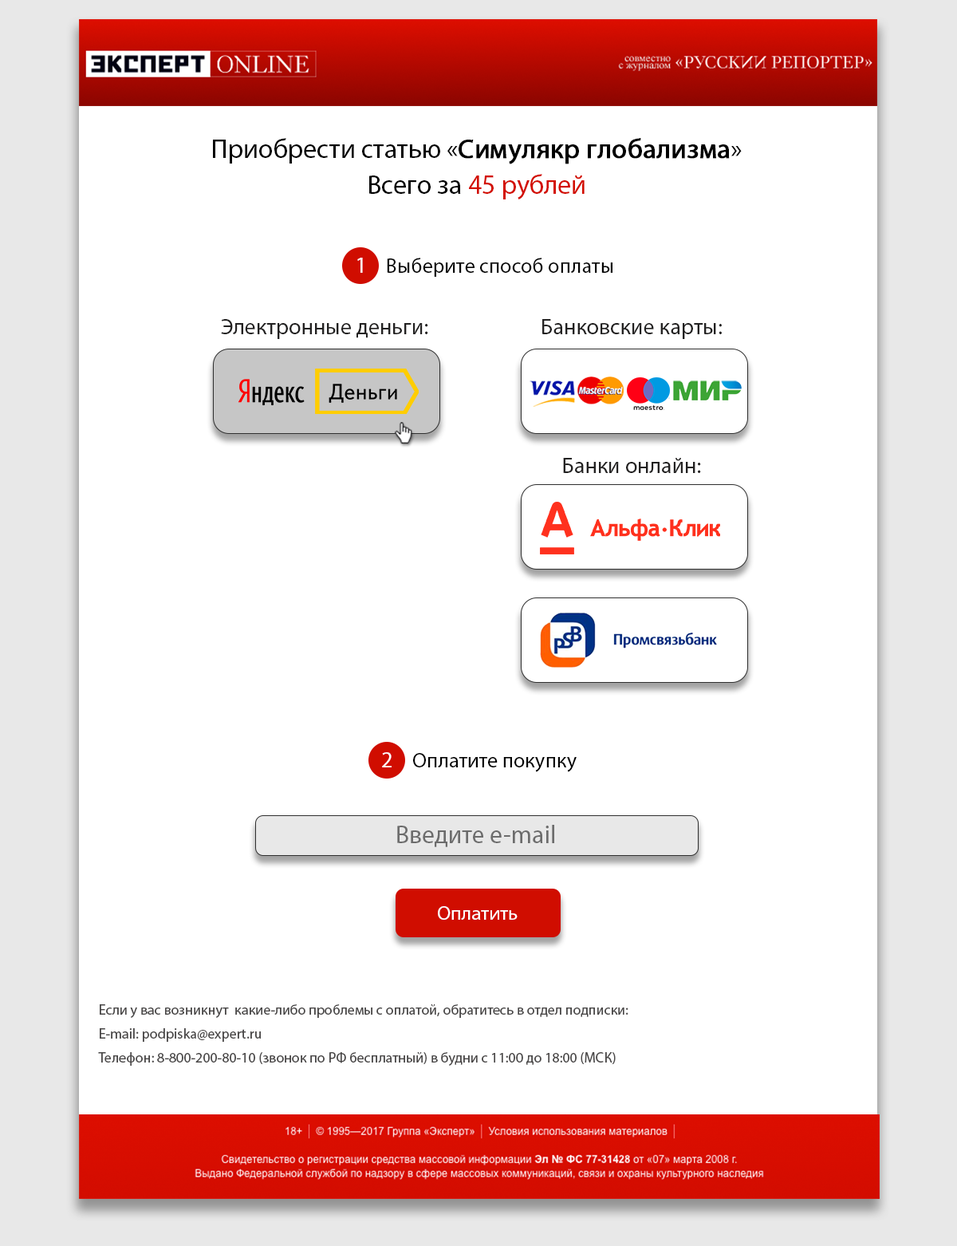
<style>
.page{position:relative;width:957px;height:1246px;background:#ffffff}
.page>*{position:absolute;margin:0}
.t1{font:27.1px/35.9px "MyriadPro-Regular";color:#000000}
.t2{font:27.1px/35.9px "MyriadPro-Regular";color:#000000;font-weight:bold}
.t3{font:27.1px/35.9px "MyriadPro-Regular";color:#d30d00}
.t4{font:22.3px "MyriadPro-Regular";color:#ffffff}
.t5{font:21px "MyriadPro-Regular";color:#000000}
.t6{font:22.4px "MyriadPro-Regular";color:#222121}
.t7{font:25.1px "MyriadPro-Regular";color:#6c6c6c}
.t8{font:19.9px "MyriadPro-Regular";color:#ffffff}
.t9{font:14.4px/23.9px "MyriadPro-Regular";color:#494747}
</style>
<div class="page">
<p class="t1" style="left:213px;top:138px;width:529px;height:61px;text-align:center">Приобрести статью «<span class="t2">Симулякр глобализма</span>»<br>Всего за <span class="t3">45 рублей</span></p>
<p class="t4" style="left:357px;top:258px;width:6px;height:15px">1</p>
<p class="t5" style="left:387px;top:258px;width:226px;height:19px">Выберите способ оплаты</p>
<p class="t6" style="left:221px;top:319px;width:207px;height:20px">Электронные деньги:</p>
<p class="t6" style="left:542px;top:319px;width:180px;height:20px">Банковские карты:</p>
<p class="t6" style="left:563px;top:458px;width:138px;height:15px">Банки онлайн:</p>
<p class="t4" style="left:382px;top:752px;width:10px;height:15px">2</p>
<p class="t5" style="left:413px;top:753px;width:164px;height:19px">Оплатите покупку</p>
<p class="t7" style="left:397px;top:825px;width:157px;height:22px">Введите e-mail</p>
<p class="t8" style="left:438px;top:906px;width:80px;height:14px">Оплатить</p>
<p class="t9" style="left:98px;top:1004px;width:531px;height:62px;text-align:right">Если у вас возникнут  какие-либо проблемы с оплатой, обратитесь в отдел подписки:<br>E-mail: podpiska@expert.ru<br>Телефон: 8-800-200-80-10 (звонок по РФ бесплатный) в будни с 11:00 до 18:00 (МСК)</p>
</div>
